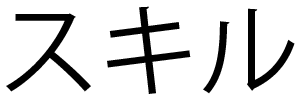
<style>
.page{position:relative;width:300px;height:100px;background:#ffffff}
.page>*{position:absolute;margin:0}
.t1{font:100px "KozGoPr6N-Regular";color:#000000}
</style>
<div class="page">
<p class="t1" style="left:6px;top:6px;width:289px;height:88px">スキル</p>
</div>
